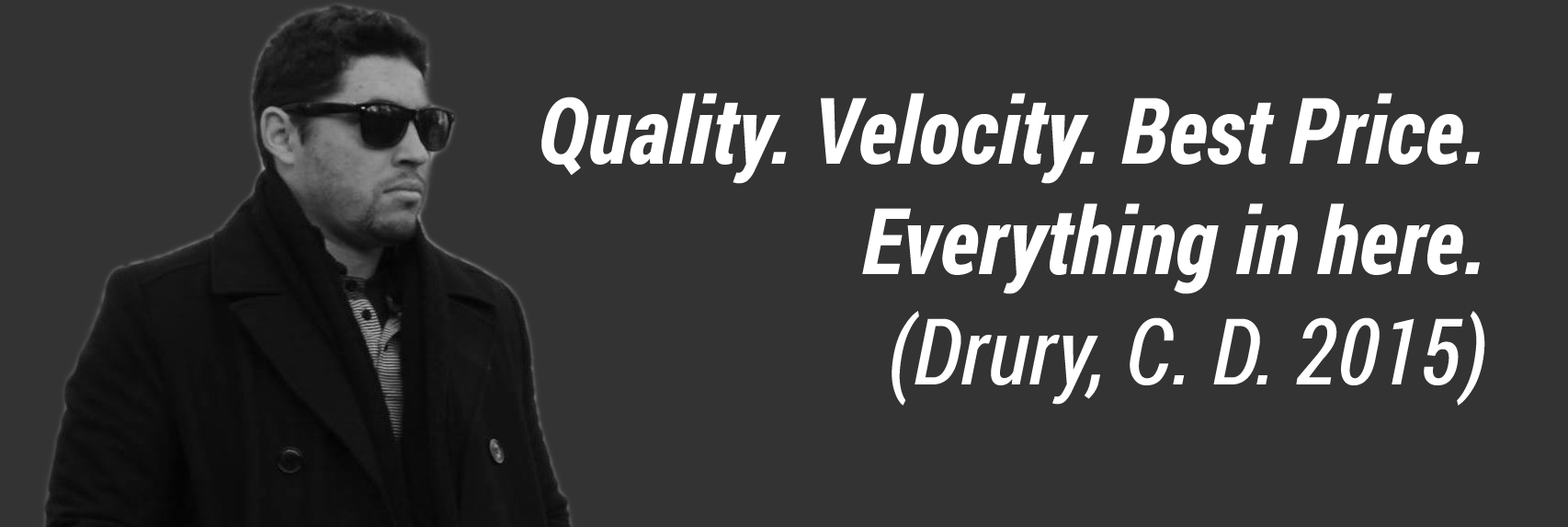
<style>
.page{position:relative;width:1568px;height:527px;background:#333333}
.page>*{position:absolute;margin:0}
.t1{font:91.9px "RobotoCondensed-BoldItalic";color:#ffffff}
.t2{font:91.9px "RobotoCondensed-Italic";color:#ffffff}
</style>
<div class="page">
<p class="t1" style="left:541px;top:93px;width:944px;height:312px;text-align:right">Quality. Velocity. Best Price.<br>Everything in here.<br><span class="t2">(Drury, C. D. 2015)</span></p>
</div>
